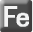
<style>
.page{position:relative;width:33px;height:32px;background:#4c4c4c}
.page>*{position:absolute;margin:0}
.t1{font:30px "¿¬Ìå";letter-spacing:-0.1em;color:#f3f3f3;font-weight:bold}
</style>
<div class="page">
<p class="t1" style="left:4px;top:6px;width:25px;height:21px">Fe</p>
</div>
